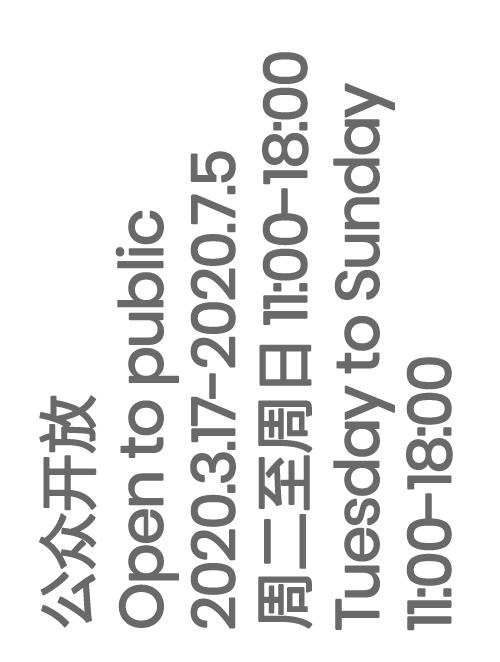
<style>
.page{position:relative;width:500px;height:662px;background:#ffffff}
.page>*{position:absolute;margin:0}
.t1{font:60px "Poppins-Regular";letter-spacing:-0.05em;color:#696969;font-weight:bold}
.t2{font:60px "SourceHanSansCN-Regular";letter-spacing:-0.05em;color:#696969;font-weight:bold}
</style>
<div class="page">
<p class="t1" style="left:39px;top:52px;width:414px;height:579px;rotate:-90deg"><span class="t2">公众开放<br></span>Open to public<br>2020.3.17-2020.7.5 <br><span class="t2">周二至周日 </span>11:00-18:00<br>Tuesday to Sunday 11:00-18:00</p>
</div>
